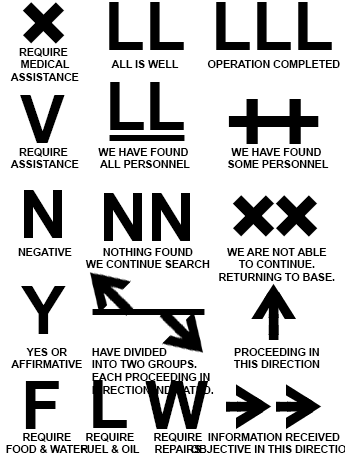
<style>
.page{position:relative;width:345px;height:454px;background:#ffffff}
.page>*{position:absolute;margin:0}
.t1{font:93.3px "Arial-BoldMT";color:#000000}
.t2{font:66.7px "Arial-BoldMT";color:#000000}
.t3{font:10.7px "Arial-BoldMT";color:#000000}
</style>
<div class="page">
<p class="t1" style="left:22px;top:2px;width:43px;height:42px;rotate:45deg">+</p>
<p class="t2" style="left:109px;top:2px;width:75px;height:48px">LL</p>
<p class="t2" style="left:216px;top:2px;width:116px;height:48px">LLL</p>
<p class="t3" style="left:10px;top:48px;width:69px;height:33px;text-align:center">REQUIRE <br>MEDICAL<br>ASSISTANCE</p>
<p class="t3" style="left:111px;top:60px;width:68px;height:8px">ALL IS WELL</p>
<p class="t3" style="left:207px;top:60px;width:133px;height:8px">OPERATION COMPLETED</p>
<p class="t2" style="left:110px;top:82px;width:74px;height:48px">LL</p>
<p class="t2" style="left:20px;top:95px;width:45px;height:48px">V</p>
<p class="t1" style="left:228px;top:99px;width:48px;height:45px">+</p>
<p class="t1" style="left:271px;top:99px;width:48px;height:45px">+</p>
<p class="t2" style="left:109px;top:135px;width:76px;height:6px">__</p>
<p class="t3" style="left:10px;top:148px;width:69px;height:20px;text-align:center">REQUIRE <br>ASSISTANCE</p>
<p class="t3" style="left:98px;top:148px;width:92px;height:20px;text-align:center">WE HAVE FOUND <br>ALL PERSONNEL</p>
<p class="t3" style="left:228px;top:148px;width:101px;height:20px;text-align:center">WE HAVE FOUND <br>SOME PERSONNEL</p>
<p class="t2" style="left:24px;top:190px;width:38px;height:48px">N</p>
<p class="t2" style="left:104px;top:193px;width:86px;height:48px">NN</p>
<p class="t1" style="left:232px;top:195px;width:43px;height:42px;rotate:45deg">+</p>
<p class="t1" style="left:275px;top:195px;width:43px;height:42px;rotate:45deg">+</p>
<p class="t3" style="left:18px;top:248px;width:54px;height:8px">NEGATIVE</p>
<p class="t3" style="left:85px;top:248px;width:125px;height:20px;text-align:center">NOTHING FOUND<br>WE CONTINUE SEARCH</p>
<p class="t3" style="left:219px;top:248px;width:116px;height:33px;text-align:center">WE ARE NOT ABLE<br>TO CONTINUE.<br>RETURNING TO BASE.</p>
<p class="t2" style="left:21px;top:286px;width:45px;height:48px">Y</p>
<p class="t2" style="left:92px;top:309px;width:113px;height:6px">___</p>
<p class="t3" style="left:11px;top:348px;width:71px;height:20px;text-align:center">YES OR<br>AFFIRMATIVE</p>
<p class="t3" style="left:92px;top:348px;width:122px;height:46px">HAVE DIVIDED <br>INTO TWO GROUPS.<br>EACH PROCEEDING IN<br>DIRECTION INDICATED.</p>
<p class="t3" style="left:233px;top:348px;width:87px;height:20px;text-align:center">PROCEEDING IN<br>THIS DIRECTION</p>
<p class="t2" style="left:25px;top:381px;width:34px;height:48px">F</p>
<p class="t2" style="left:93px;top:380px;width:34px;height:48px">L</p>
<p class="t2" style="left:145px;top:381px;width:64px;height:48px">W</p>
<p class="t3" style="left:6px;top:433px;width:82px;height:20px;text-align:center">REQUIRE<br>FOOD &amp; WATER</p>
<p class="t3" style="left:80px;top:433px;width:60px;height:20px;text-align:center">REQUIRE<br>FUEL &amp; OIL</p>
<p class="t3" style="left:154px;top:433px;width:48px;height:20px;text-align:center">REQUIRE<br>REPAIRS</p>
</div>
